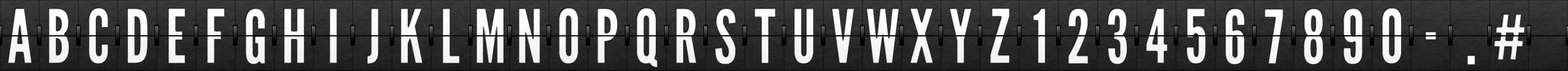
<style>
.page{position:relative;width:1568px;height:71px}
.page>*{position:absolute;margin:0}
.t1{font:73.9px "LeagueGothic";letter-spacing:0.06em;color:#ffffff;scale:0.91 1}
.t2{font:61.6px "LeagueGothic";letter-spacing:0.06em;color:#ffffff;scale:0.91 1}
</style>
<div class="page">
<p class="t1" style="left:7px;top:8px;width:24px;height:55px">A</p>
<p class="t1" style="left:48px;top:8px;width:21px;height:55px">B</p>
<p class="t1" style="left:88px;top:7px;width:20px;height:56px">C</p>
<p class="t1" style="left:127px;top:8px;width:21px;height:55px">D</p>
<p class="t1" style="left:168px;top:8px;width:17px;height:55px">E</p>
<p class="t1" style="left:207px;top:8px;width:18px;height:55px">F</p>
<p class="t1" style="left:245px;top:8px;width:20px;height:56px">G</p>
<p class="t1" style="left:283px;top:8px;width:21px;height:55px">H</p>
<p class="t1" style="left:329px;top:8px;width:8px;height:55px">I</p>
<p class="t1" style="left:367px;top:8px;width:12px;height:55px">J</p>
<p class="t1" style="left:400px;top:8px;width:23px;height:55px">K</p>
<p class="t1" style="left:442px;top:8px;width:17px;height:55px">L</p>
<p class="t1" style="left:476px;top:8px;width:27px;height:55px">M</p>
<p class="t1" style="left:518px;top:8px;width:22px;height:55px">N</p>
<p class="t1" style="left:558px;top:7px;width:20px;height:56px">O</p>
<p class="t1" style="left:597px;top:8px;width:21px;height:55px">P</p>
<p class="t1" style="left:636px;top:7px;width:21px;height:60px">Q</p>
<p class="t1" style="left:675px;top:8px;width:21px;height:55px">R</p>
<p class="t1" style="left:715px;top:8px;width:21px;height:56px">S</p>
<p class="t1" style="left:754px;top:8px;width:22px;height:55px">T</p>
<p class="t1" style="left:794px;top:8px;width:20px;height:55px">U</p>
<p class="t1" style="left:831px;top:8px;width:23px;height:55px">V</p>
<p class="t1" style="left:866px;top:8px;width:33px;height:55px">W</p>
<p class="t1" style="left:909px;top:8px;width:24px;height:55px">X</p>
<p class="t1" style="left:949px;top:8px;width:23px;height:55px">Y</p>
<p class="t1" style="left:990px;top:8px;width:20px;height:55px">Z</p>
<p class="t1" style="left:1033px;top:8px;width:12px;height:55px">1</p>
<p class="t1" style="left:1068px;top:8px;width:20px;height:55px">2</p>
<p class="t1" style="left:1107px;top:8px;width:20px;height:56px">3</p>
<p class="t1" style="left:1146px;top:8px;width:22px;height:55px">4</p>
<p class="t1" style="left:1186px;top:8px;width:20px;height:55px">5</p>
<p class="t1" style="left:1225px;top:8px;width:19px;height:56px">6</p>
<p class="t1" style="left:1264px;top:8px;width:19px;height:55px">7</p>
<p class="t1" style="left:1303px;top:8px;width:20px;height:56px">8</p>
<p class="t1" style="left:1343px;top:8px;width:19px;height:56px">9</p>
<p class="t1" style="left:1382px;top:7px;width:19px;height:56px">0</p>
<p class="t2" style="left:1494px;top:13px;width:31px;height:46px">#</p>
<p class="t1" style="left:1467px;top:55px;width:8px;height:9px">.</p>
</div>
